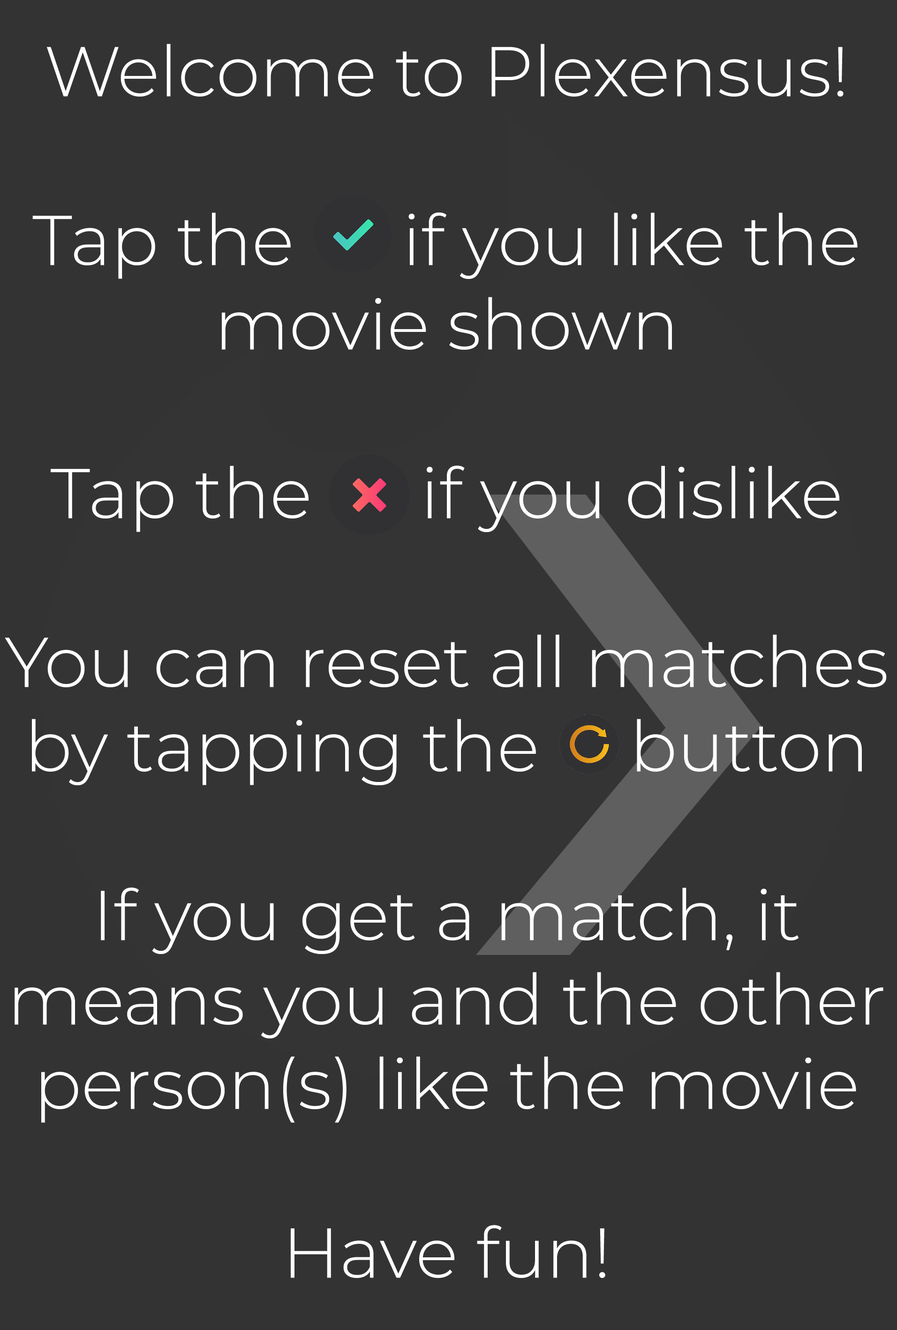
<style>
.page{position:relative;width:897px;height:1330px;background:#333333}
.page>*{position:absolute;margin:0}
.t1{font:70.3px "Montserrat-Light";color:#ffffff}
</style>
<div class="page">
<p class="t1" style="left:5px;top:44px;width:881px;height:1234px;text-align:center">Welcome to Plexensus!<br><br>Tap the      if you like the movie shown<br><br>Tap the      if you dislike<br><br>You can reset all matches by tapping the     button<br><br>If you get a match, it means you and the other person(s) like the movie<br><br>Have fun!</p>
</div>
